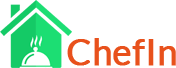
<style>
.page{position:relative;width:176px;height:68px;background:#ffffff}
.page>*{position:absolute;margin:0}
.t1{font:35.5px "Lato-Regular";color:#e8511c;font-weight:bold}
</style>
<div class="page">
<p class="t1" style="left:67px;top:38px;width:109px;height:28px">ChefIn</p>
</div>
